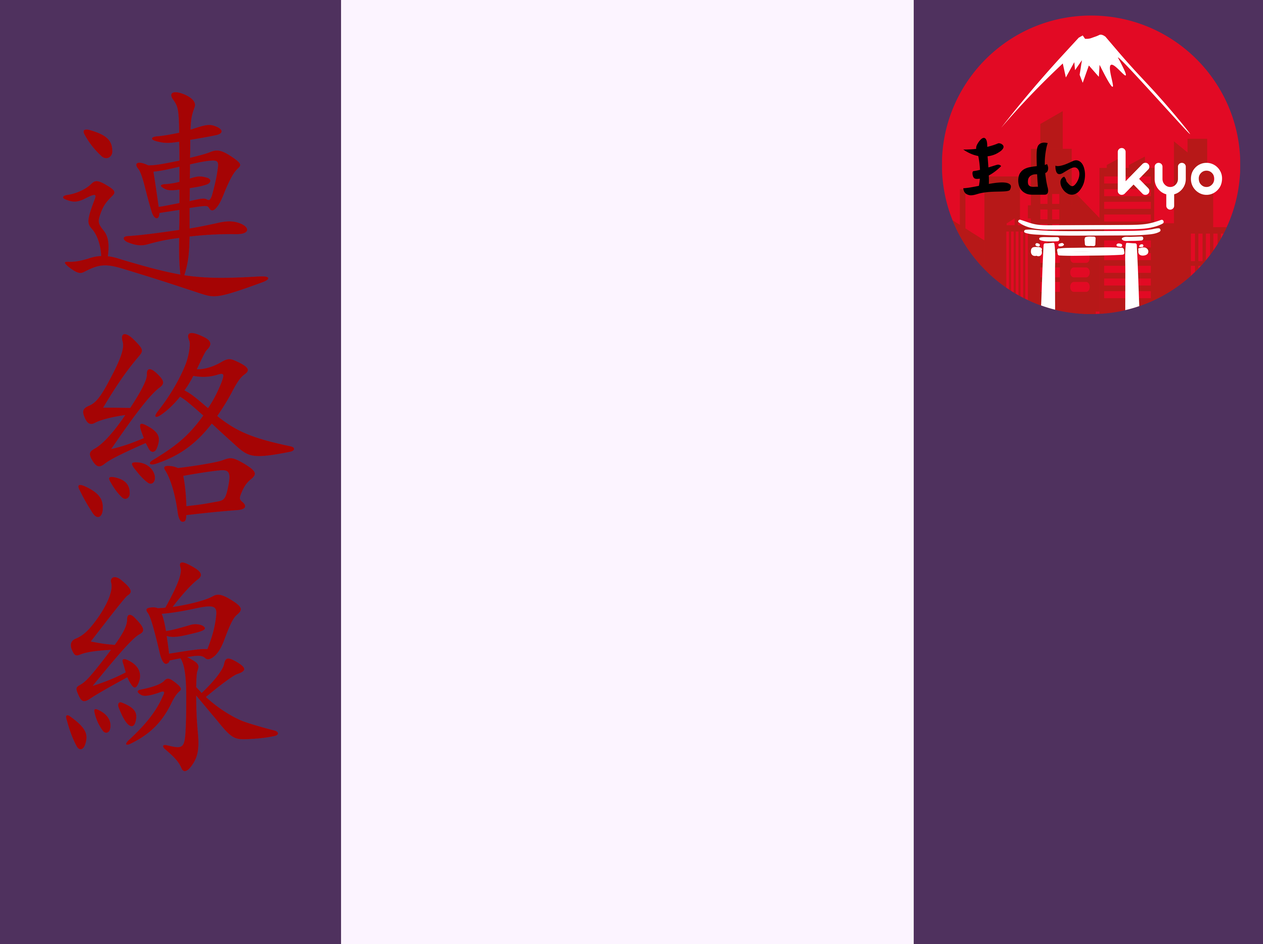
<style>
.page{position:relative;width:1263px;height:944px;background:#fcf4ff}
.page>*{position:absolute;margin:0}
.t1{font:237.5px "AdobeKaitiStd-Regular";color:#a50404}
</style>
<div class="page">
<p class="t1" style="left:63px;top:92px;width:206px;height:204px">連</p>
<p class="t1" style="left:78px;top:333px;width:216px;height:189px">絡</p>
<p class="t1" style="left:66px;top:562px;width:212px;height:209px">線</p>
</div>
